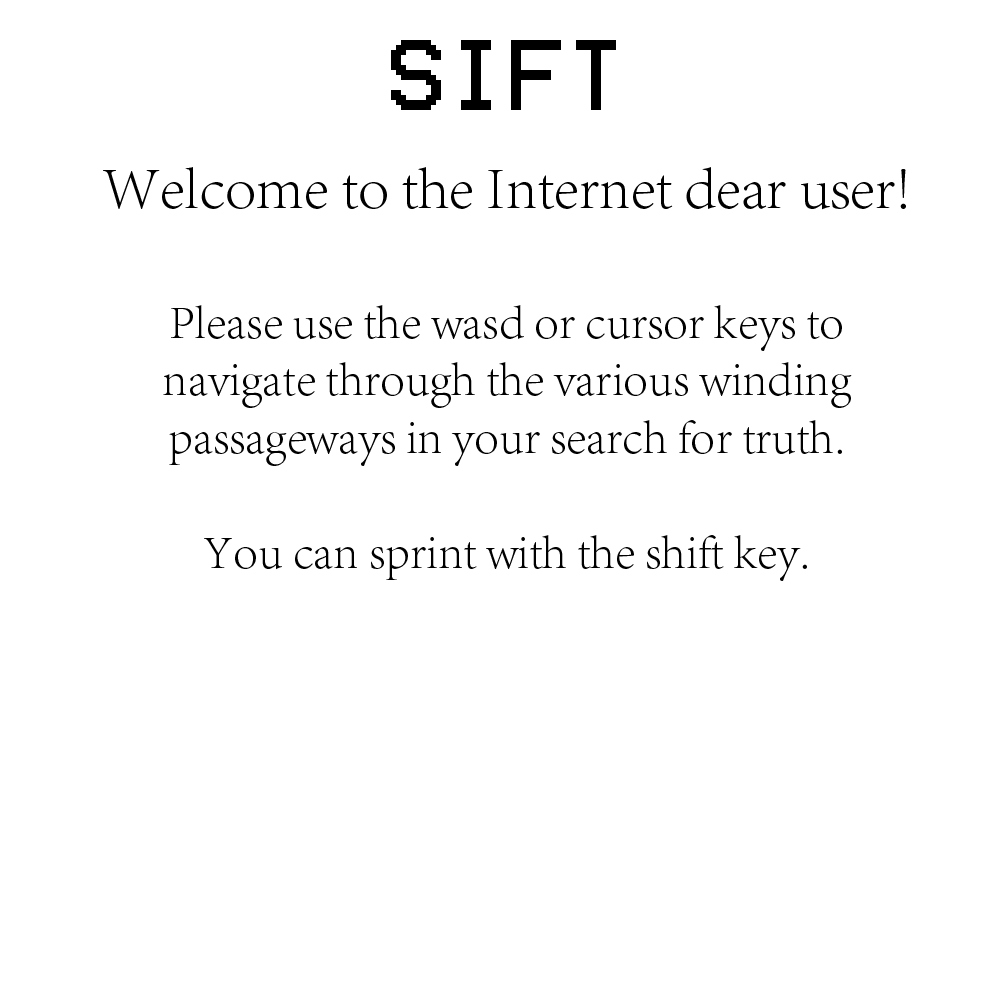
<style>
.page{position:relative;width:1000px;height:1000px;background:#ffffff}
.page>*{position:absolute;margin:0}
.t1{font:80px "Terminal";color:#000000}
.t2{font:48px "AdobeSongStd-Light";color:#000000}
.t3{font:80px "AdobeSongStd-Light";color:#000000}
.t4{font:60px "AdobeSongStd-Light";color:#000000}
</style>
<div class="page">
<p class="t1" style="left:391px;top:40px;width:225px;height:70px">SIFT</p>
<p class="t2" style="left:103px;top:167px;width:803px;height:414px;text-align:center"><span class="t3"><br><br></span><span class="t4">Welcome to the Internet dear user! <br><br></span>Please use the wasd or cursor keys to <br>navigate through the various winding <br>passageways in your search for truth.<br><br>You can sprint with the shift key.</p>
</div>
